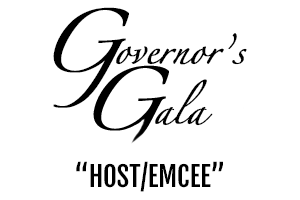
<style>
.page{position:relative;width:300px;height:200px;background:#ffffff}
.page>*{position:absolute;margin:0}
.t1{font:56.1px/64.9px "Zapfino";letter-spacing:-0.01em;color:#000000;font-weight:bold}
.t2{font:25.9px "Zapfino";letter-spacing:-0.01em;color:#000000;font-weight:bold}
.t3{font:25.9px/30px "Zapfino";letter-spacing:-0.01em;color:#000000;font-weight:bold}
.t4{font:27.4px "FjallaOne-Regular";letter-spacing:-0.01em;color:#000000;text-transform:uppercase}
</style>
<div class="page">
<p class="t1" style="left:53px;top:7px;width:76px;height:101px;text-align:center">G</p>
<p class="t2" style="left:116px;top:33px;width:131px;height:32px">overnor’s</p>
<p class="t3" style="left:155px;top:79px;width:58px;height:47px;text-align:center">ala</p>
<p class="t4" style="left:76px;top:161px;width:147px;height:31px">“Host/emcee”</p>
</div>
